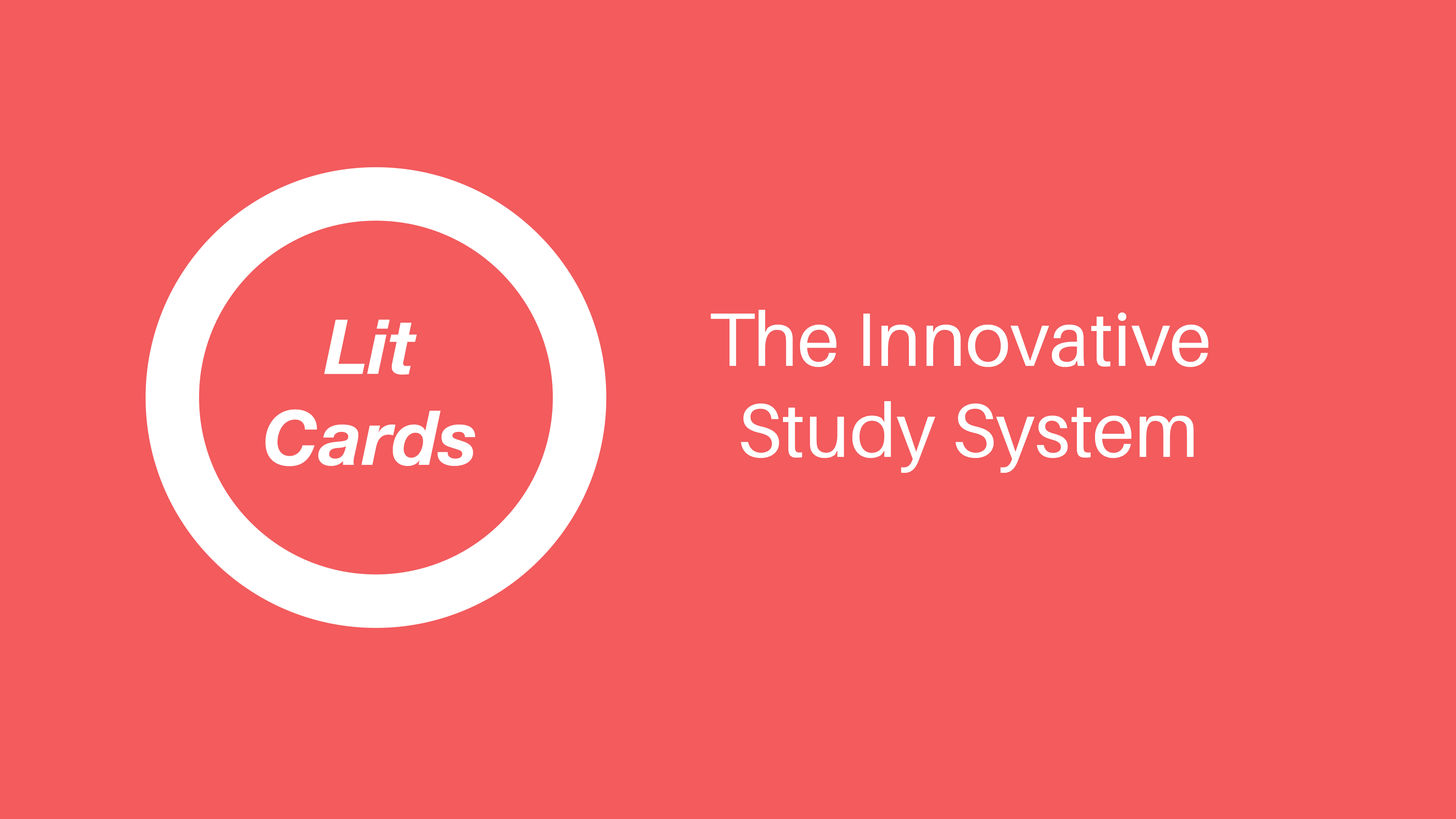
<style>
.page{position:relative;width:1456px;height:819px;background:#f35b5d}
.page>*{position:absolute;margin:0}
.t1{font:75.8px "Aileron-Regular";color:#ffffff}
.t2{font:75.8px "HelveticaNeueLTStd-BdIt";color:#ffffff}
</style>
<div class="page">
<p class="t1" style="left:711px;top:310px;width:497px;height:163px;text-align:center">The Innovative <br>Study System</p>
<p class="t2" style="left:265px;top:320px;width:210px;height:146px;text-align:center">Lit Cards</p>
</div>
